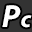
<style>
.page{position:relative;width:32px;height:32px;background:#333333}
.page>*{position:absolute;margin:0}
.t1{font:32px "MyriadHebrew-BoldIt";color:#ffffff}
.t2{font:24px "MyriadHebrew-BoldIt";color:#ffffff}
</style>
<div class="page">
<p class="t1" style="left:2px;top:5px;width:30px;height:23px">P<span class="t2">c</span></p>
</div>
